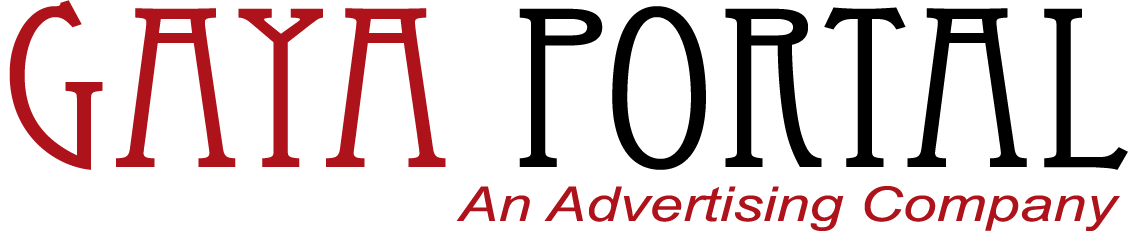
<style>
.page{position:relative;width:1133px;height:231px;background:#ffffff}
.page>*{position:absolute;margin:0}
.t1{font:223.2px "EccentricStd";color:#000000;scale:1.25 1}
.t2{font:223.2px "EccentricStd";color:#ae131b;scale:1.25 1}
.t3{font:48px "Arial-ItalicMT";color:#ae131b;scale:1.25 1}
</style>
<div class="page">
<p class="t1" style="left:9px;top:0px;width:1119px;height:170px"><span class="t2">GAYA </span>PORTAL</p>
<p class="t3" style="left:456px;top:186px;width:664px;height:45px">An Advertising Company</p>
</div>
